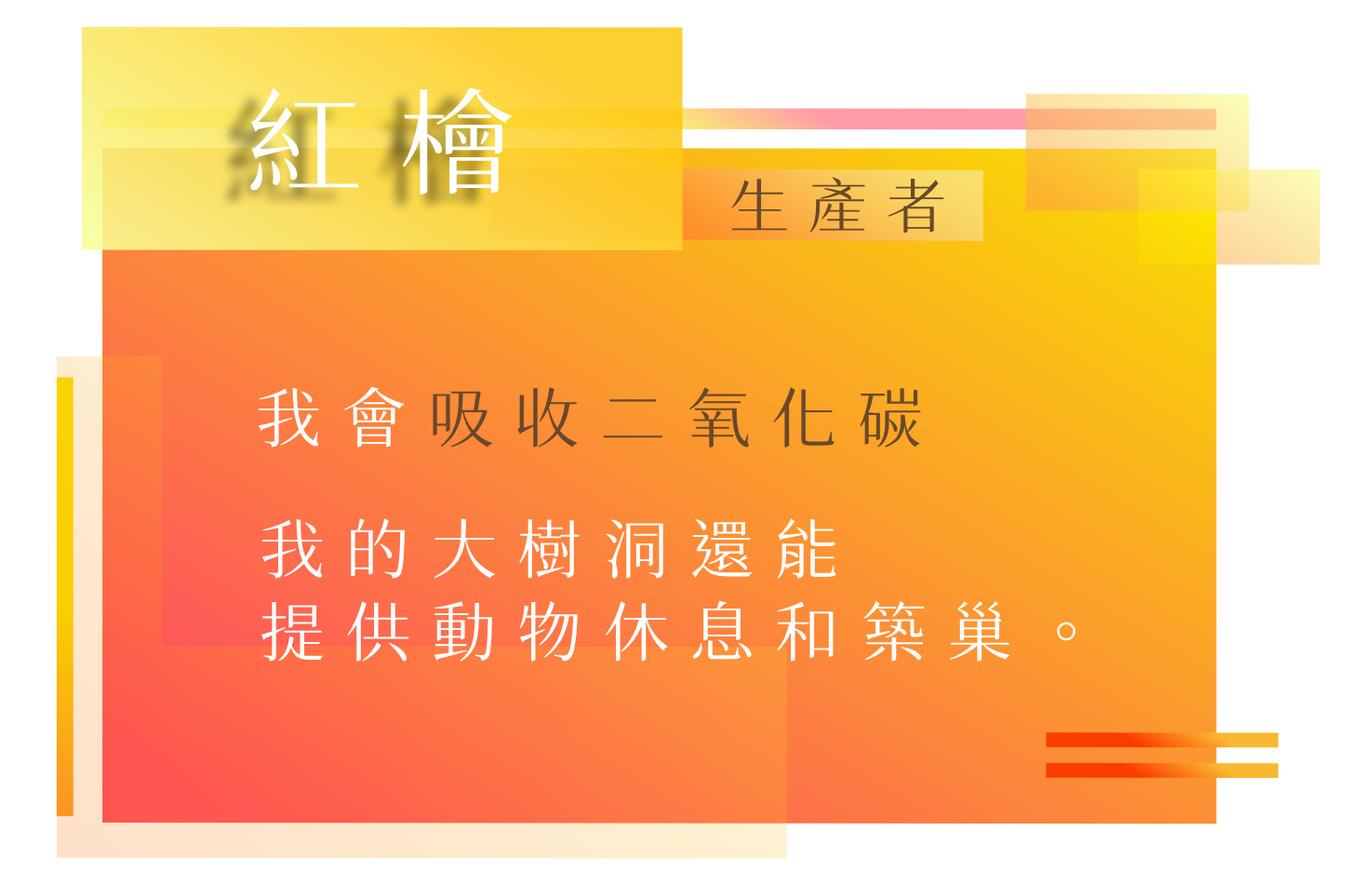
<style>
.page{position:relative;width:1349px;height:884px;background:#ffffff}
.page>*{position:absolute;margin:0}
.t1{font:116.3px "SweiSpringCJKtc-Regular";letter-spacing:0.32em;color:#ffffff;text-transform:uppercase}
.t2{font:59.5px "SweiSpringCJKtc-Regular";letter-spacing:0.32em;color:#6a482b;text-transform:uppercase}
.t3{font:65.1px "SweiSpringCJKtc-Regular";letter-spacing:0.32em;color:#6a482b;text-transform:uppercase}
.t4{font:65.1px "SweiSpringCJKtc-Regular";letter-spacing:0.32em;color:#ffffff;text-transform:uppercase}
</style>
<div class="page">
<p class="t1" style="left:248px;top:87px;width:264px;height:107px">紅檜</p>
<p class="t2" style="left:731px;top:177px;width:213px;height:56px">生產者</p>
<p class="t3" style="left:258px;top:386px;width:663px;height:62px"><span class="t4">我會</span>吸收二氧化碳</p>
<p class="t4" style="left:261px;top:518px;width:575px;height:62px">我的大樹洞還能</p>
<p class="t4" style="left:261px;top:600px;width:815px;height:62px">提供動物休息和築巢。</p>
</div>
